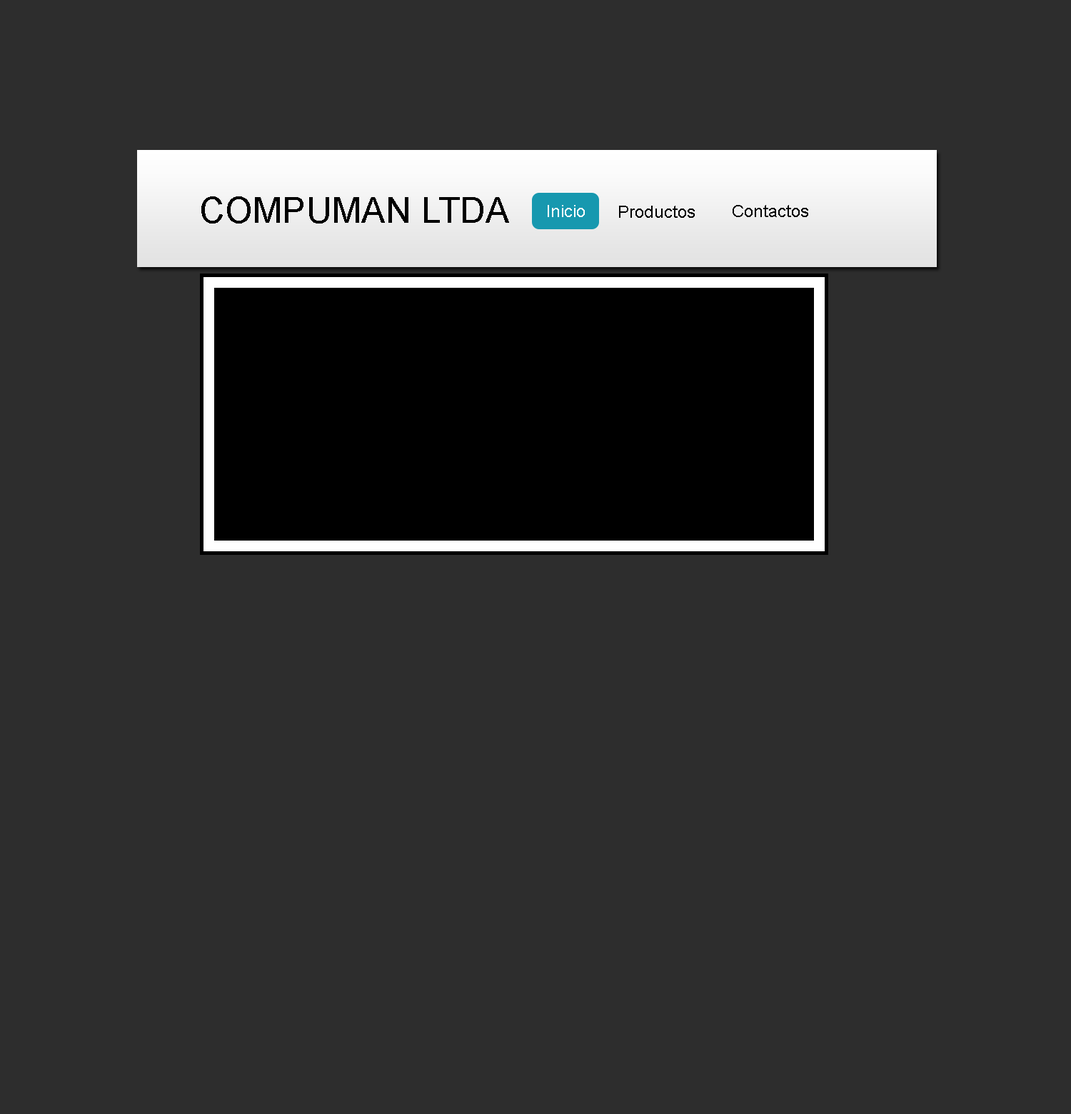
<style>
.page{position:relative;width:1071px;height:1114px;background:#2d2d2d}
.page>*{position:absolute;margin:0}
.t1{font:35.7px "ArialMT";color:#000000}
.t2{font:17.1px "ArialMT";color:#ffffff}
.t3{font:17.1px "ArialMT";color:#000000}
</style>
<div class="page">
<p class="t1" style="left:201px;top:196px;width:308px;height:27px">COMPUMAN LTDA</p>
<p class="t2" style="left:548px;top:205px;width:37px;height:12px">Inicio</p>
<p class="t3" style="left:619px;top:206px;width:76px;height:12px">Productos</p>
<p class="t3" style="left:732px;top:205px;width:76px;height:12px">Contactos</p>
</div>
